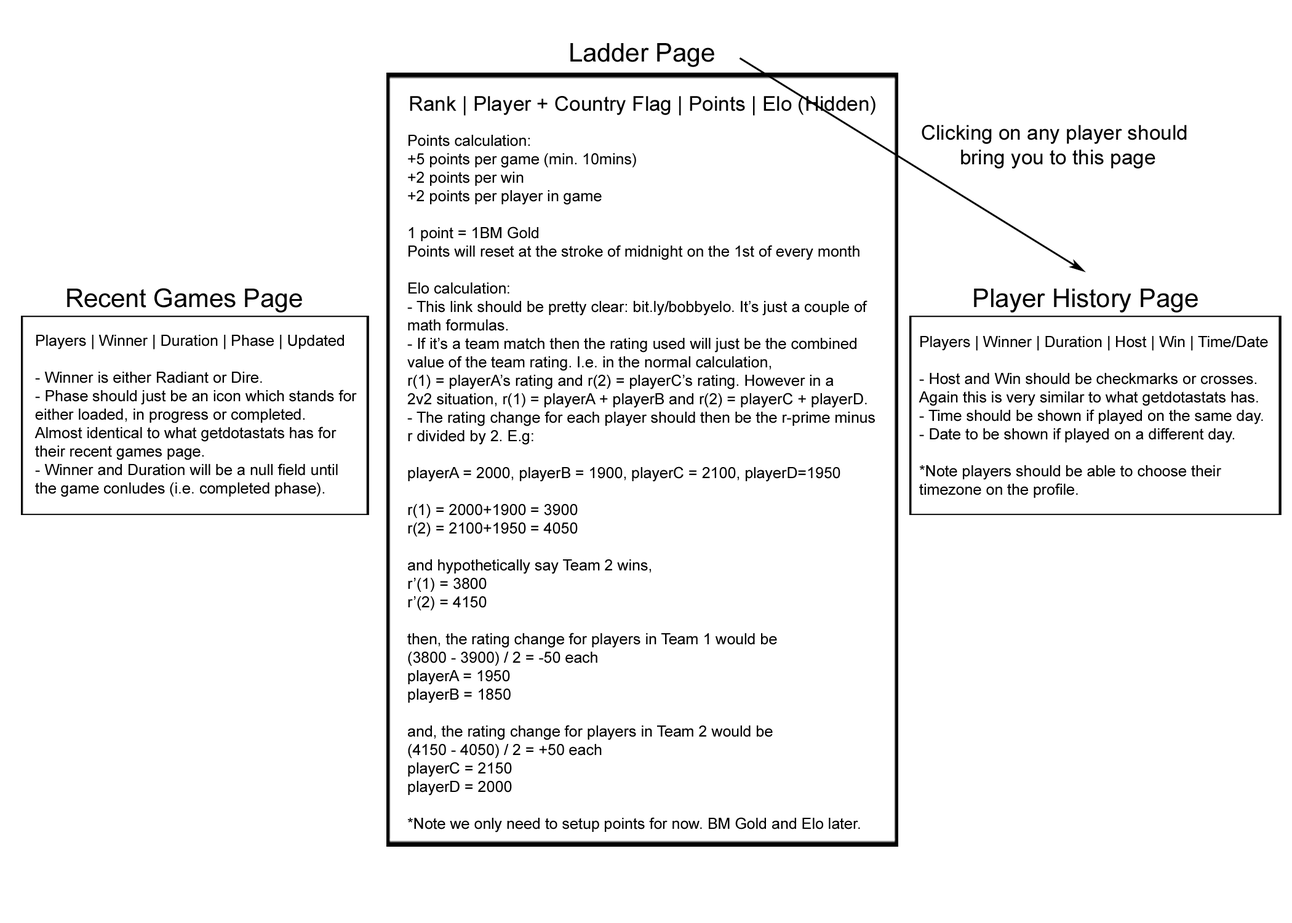
<style>
.page{position:relative;width:1292px;height:923px;background:#ffffff}
.page>*{position:absolute;margin:0}
.t1{font:25.6px "ArialMT";color:#000000}
.t2{font:20.5px "ArialMT";color:#000000}
.t3{font:15.4px "ArialMT";color:#000000}
</style>
<div class="page">
<p class="t1" style="left:570px;top:43px;width:144px;height:24px">Ladder Page</p>
<p class="t2" style="left:410px;top:96px;width:466px;height:20px">Rank | Player + Country Flag | Points | Elo (Hidden)</p>
<p class="t2" style="left:922px;top:125px;width:265px;height:44px;text-align:center">Clicking on any player should <br>bring you to this page</p>
<p class="t3" style="left:407px;top:135px;width:468px;height:697px">Points calculation:<br>+5 points per game (min. 10mins)<br>+2 points per win<br>+2 points per player in game<br><br>1 point = 1BM Gold<br>Points will reset at the stroke of midnight on the 1st of every month<br><br>Elo calculation:<br>- This link should be pretty clear: bit.ly/bobbyelo. It’s just a couple of<br>math formulas.<br>- If it’s a team match then the rating used will just be the combined<br>value of the team rating. I.e. in the normal calculation, <br>r(1) = playerA’s rating and r(2) = playerC’s rating. However in a <br>2v2 situation, r(1) = playerA + playerB and r(2) = playerC + playerD.<br>- The rating change for each player should then be the r-prime minus<br>r divided by 2. E.g:<br><br>playerA = 2000, playerB = 1900, playerC = 2100, playerD=1950<br><br>r(1) = 2000+1900 = 3900<br>r(2) = 2100+1950 = 4050<br><br>and hypothetically say Team 2 wins,<br>r’(1) = 3800<br>r’(2) = 4150<br><br>then, the rating change for players in Team 1 would be<br>(3800 - 3900) / 2 = -50 each<br>playerA = 1950<br>playerB = 1850<br><br>and, the rating change for players in Team 2 would be<br>(4150 - 4050) / 2 = +50 each<br>playerC = 2150<br>playerD = 2000<br><br>*Note we only need to setup points for now. BM Gold and Elo later.</p>
<p class="t1" style="left:67px;top:288px;width:235px;height:25px">Recent Games Page</p>
<p class="t1" style="left:974px;top:289px;width:224px;height:24px">Player History Page</p>
<p class="t3" style="left:34px;top:335px;width:323px;height:162px">Players | Winner | Duration | Phase | Updated<br><br>- Winner is either Radiant or Dire.<br>- Phase should just be an icon which stands for<br>either loaded, in progress or completed. <br>Almost identical to what getdotastats has for<br>their recent games page.<br>- Winner and Duration will be a null field until<br>the game conludes (i.e. completed phase).</p>
<p class="t3" style="left:919px;top:336px;width:349px;height:162px">Players | Winner | Duration | Host | Win | Time/Date<br><br>- Host and Win should be checkmarks or crosses.<br>Again this is very similar to what getdotastats has.<br>- Time should be shown if played on the same day.<br>- Date to be shown if played on a different day.<br><br>*Note players should be able to choose their<br>timezone on the profile.</p>
</div>
